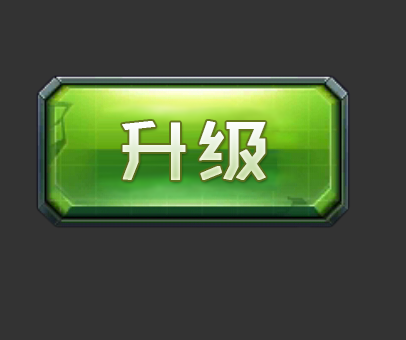
<style>
.page{position:relative;width:406px;height:340px;background:#333333}
.page>*{position:absolute;margin:0}
.t1{font:72px "ZHSCNMT--GBK1-0";letter-spacing:0.06em;font-weight:bold}
</style>
<div class="page">
<p class="t1" style="left:122px;top:121px;width:144px;height:59px">升级</p>
</div>
